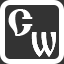
<style>
.page{position:relative;width:64px;height:64px;background:#333333}
.page>*{position:absolute;margin:0}
.t1{font:38px "Izhitsa";letter-spacing:0.045em;color:#ffffff}
.t2{font:32.5px "Izhitsa";letter-spacing:0.045em;color:#ffffff;scale:0.8 1}
</style>
<div class="page">
<p class="t1" style="left:8px;top:9px;width:25px;height:27px">C</p>
<p class="t2" style="left:31px;top:32px;width:25px;height:25px">W</p>
<p class="t2" style="left:31px;top:32px;width:25px;height:25px">W</p>
<p class="t2" style="left:31px;top:32px;width:25px;height:25px">W</p>
</div>
